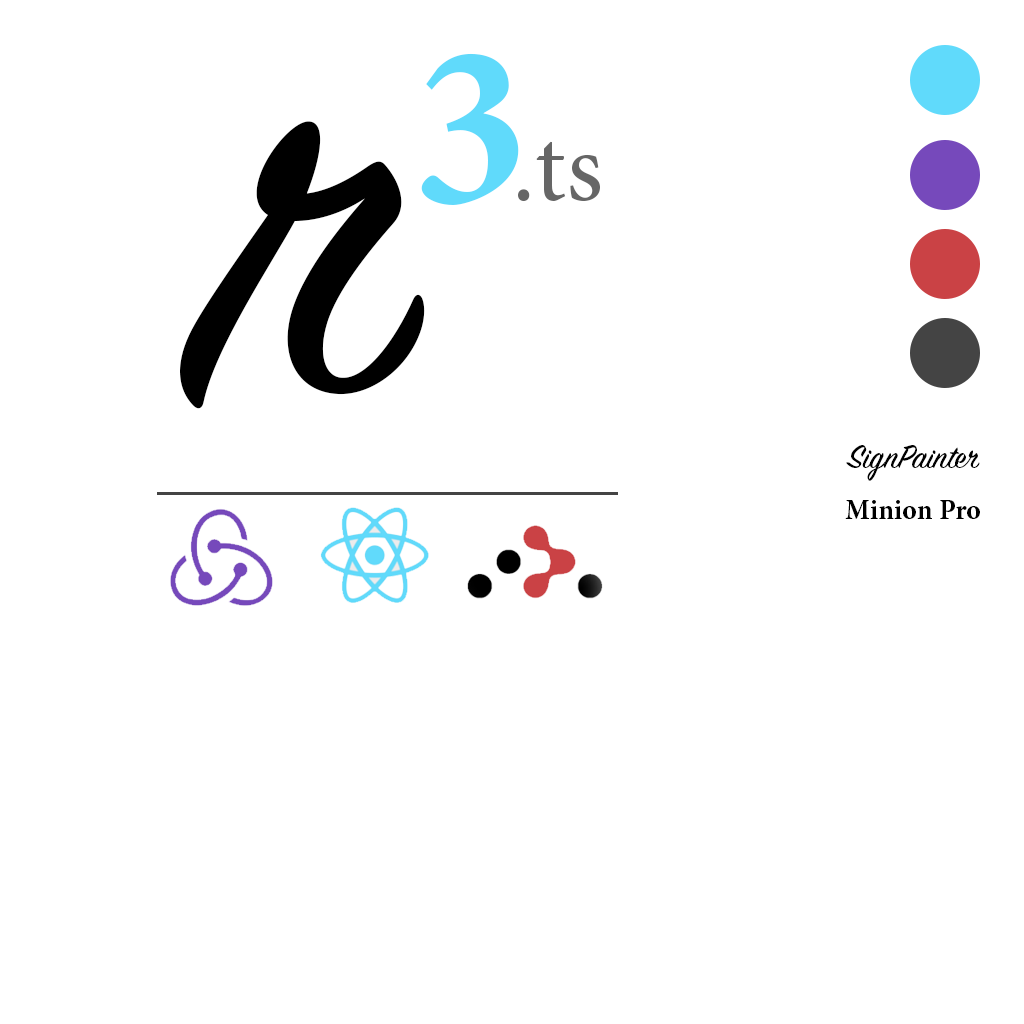
<style>
.page{position:relative;width:1024px;height:1024px;background:#ffffff}
.page>*{position:absolute;margin:0}
.t1{font:232.5px "MinionPro-Bold";color:#60dafb}
.t2{font:600px "SignPainter-HouseScript";color:#000000}
.t3{font:101.4px "MinionPro-Regular";color:#666666}
.t4{font:36px "SignPainter-HouseScript";color:#000000}
.t5{font:28px "MinionPro-Bold";color:#000000}
</style>
<div class="page">
<p class="t1" style="left:421px;top:53px;width:98px;height:152px">3</p>
<p class="t2" style="left:180px;top:121px;width:245px;height:288px">r</p>
<p class="t3" style="left:518px;top:141px;width:82px;height:61px">.ts</p>
<p class="t4" style="left:846px;top:445px;width:134px;height:36px">SignPainter</p>
<p class="t5" style="left:845px;top:500px;width:135px;height:19px">Minion Pro</p>
</div>
